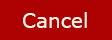
<style>
.page{position:relative;width:112px;height:40px;background:#ad0202}
.page>*{position:absolute;margin:0}
.t1{font:20px "MSReferenceSansSerif";color:#edf2e7}
</style>
<div class="page">
<p class="t1" style="left:23px;top:12px;width:64px;height:16px">Cancel</p>
</div>
